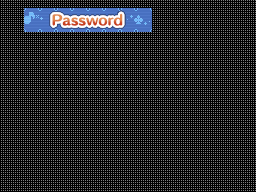
<style>
.page{position:relative;width:256px;height:192px;background:#000000}
.page>*{position:absolute;margin:0}
.t1{font:13px "HummingStd-E";letter-spacing:0.02em}
</style>
<div class="page">
<p class="t1" style="left:52px;top:13px;width:71px;height:13px">Password</p>
</div>
